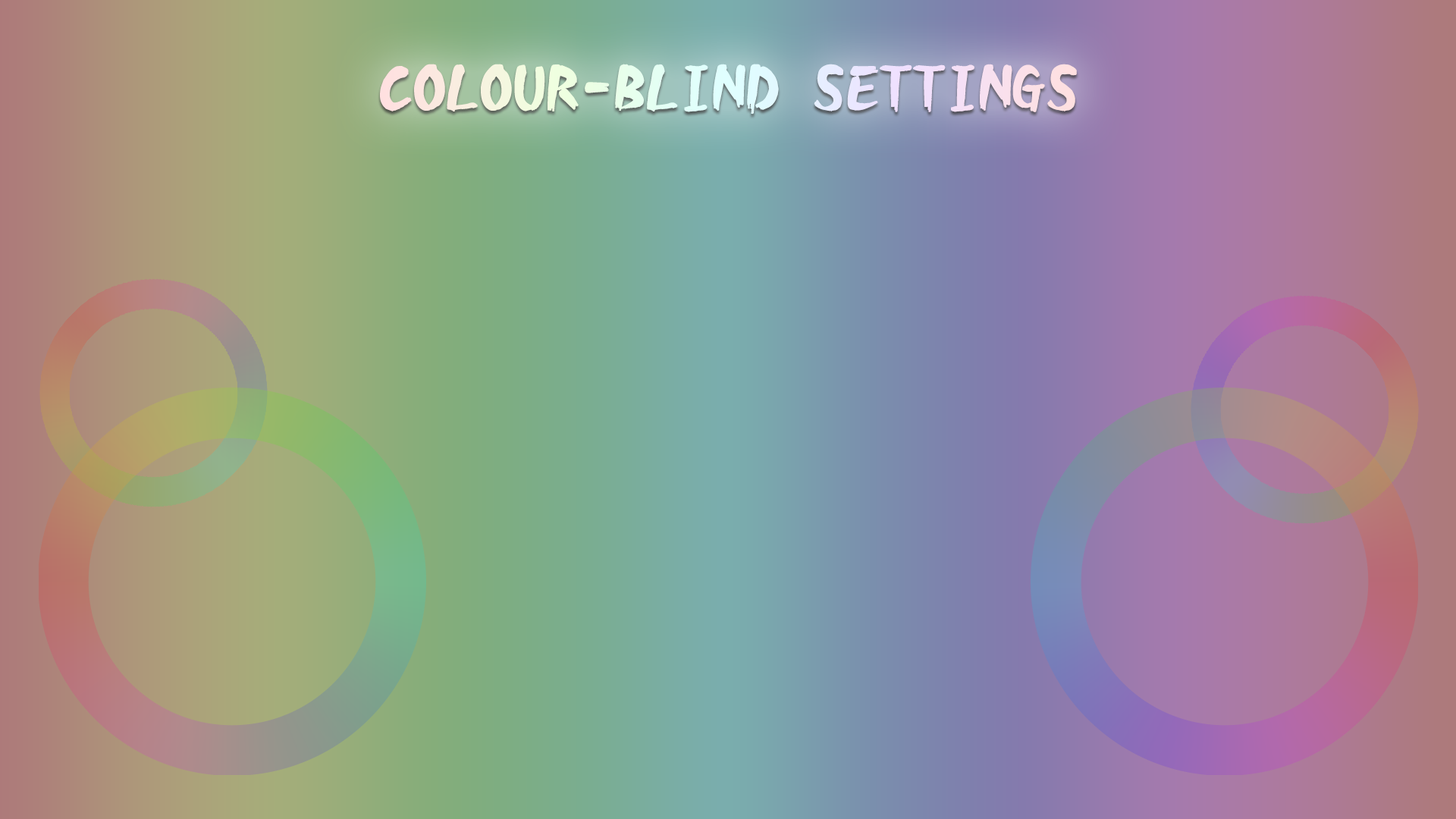
<style>
.page{position:relative;width:1456px;height:819px}
.page>*{position:absolute;margin:0}
.t1{font:63.2px "Hakuu";color:#f1eeec;font-weight:bold}
</style>
<div class="page">
<p class="t1" style="left:380px;top:64px;width:697px;height:51px">COLOUR-BLIND SETTINGS</p>
</div>
